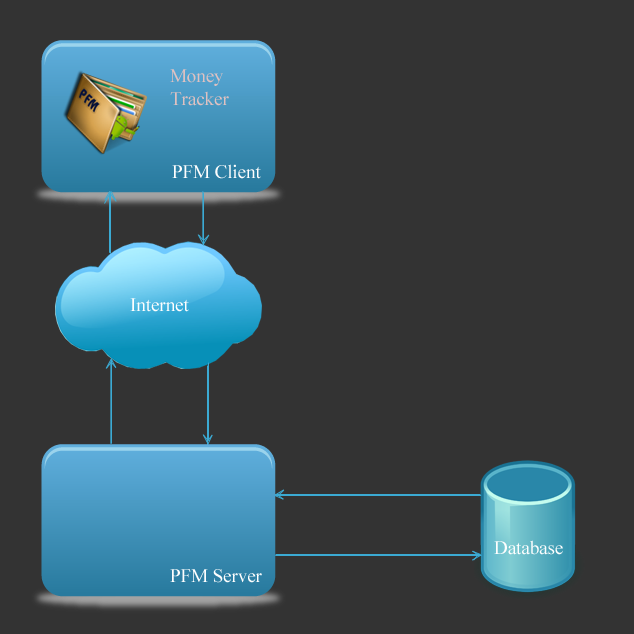
<style>
.page{position:relative;width:634px;height:634px;background:#333333}
.page>*{position:absolute;margin:0}
.t1{font:18.9px "TimesNewRomanPSMT";color:#dfc1c1}
.t2{font:18.9px "TimesNewRomanPSMT";color:#fefefe}
</style>
<div class="page">
<p class="t1" style="left:170px;top:69px;width:59px;height:37px">Money <br>Tracker</p>
<p class="t2" style="left:172px;top:164px;width:89px;height:15px">PFM Client</p>
<p class="t2" style="left:130px;top:298px;width:59px;height:14px">Internet</p>
<p class="t2" style="left:494px;top:540px;width:69px;height:15px">Database</p>
<p class="t2" style="left:170px;top:569px;width:92px;height:14px">PFM Server</p>
</div>
